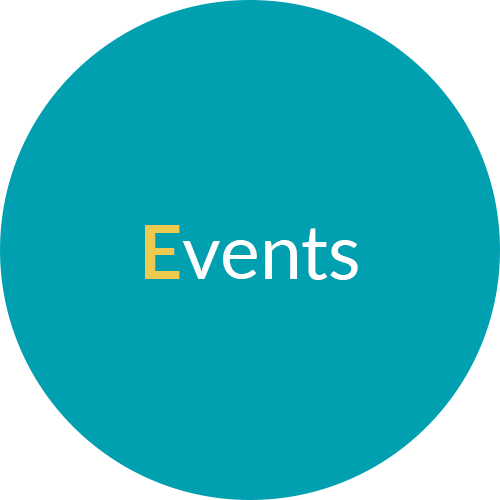
<style>
.page{position:relative;width:500px;height:500px;background:#01a0b0}
.page>*{position:absolute;margin:0}
.t1{font:75px "Lato-Regular";color:#ffffff}
.t2{font:75px "Lato-Bold";color:#edc950}
</style>
<div class="page">
<p class="t1" style="left:145px;top:225px;width:213px;height:55px"><span class="t2">E</span>vents</p>
</div>
